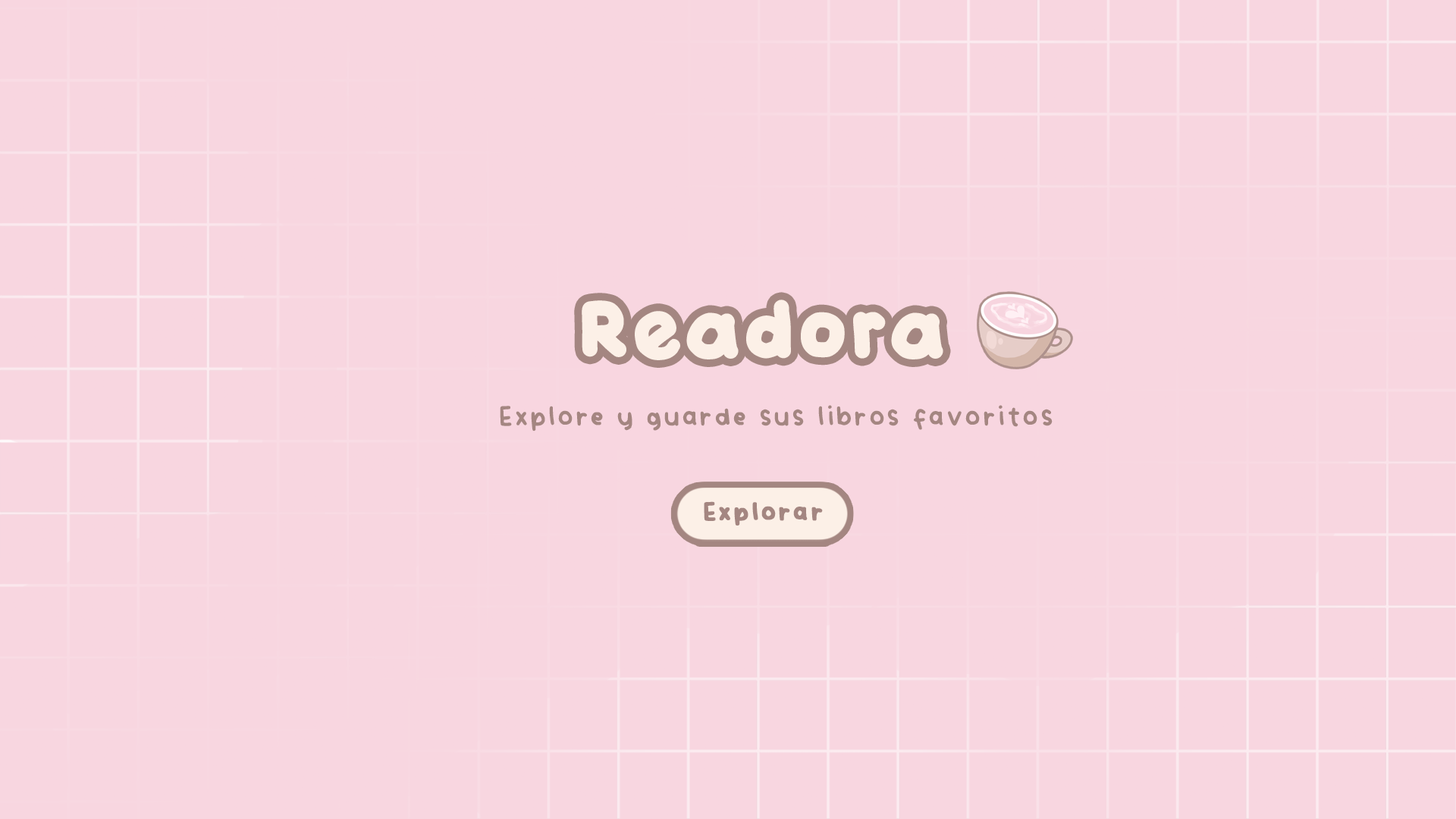
<style>
.page{position:relative;width:1456px;height:819px;background:#f8d6e0}
.page>*{position:absolute;margin:0}
.t1{font:75.8px "Pedagogique-Bold-Regular";letter-spacing:0.025em;color:#fcf0e7}
.t2{font:40.9px "Vividly-Regular";letter-spacing:0.01em;color:#a48681}
.t3{font:37.7px "Vividly-Regular";letter-spacing:0.01em;color:#a48681;font-weight:bold}
</style>
<div class="page">
<p class="t1" style="left:582px;top:300px;width:361px;height:60px">Readora</p>
<p class="t2" style="left:500px;top:405px;width:553px;height:26px">Explore y guarde sus libros favoritos</p>
<p class="t3" style="left:704px;top:501px;width:119px;height:25px">Explorar</p>
</div>
